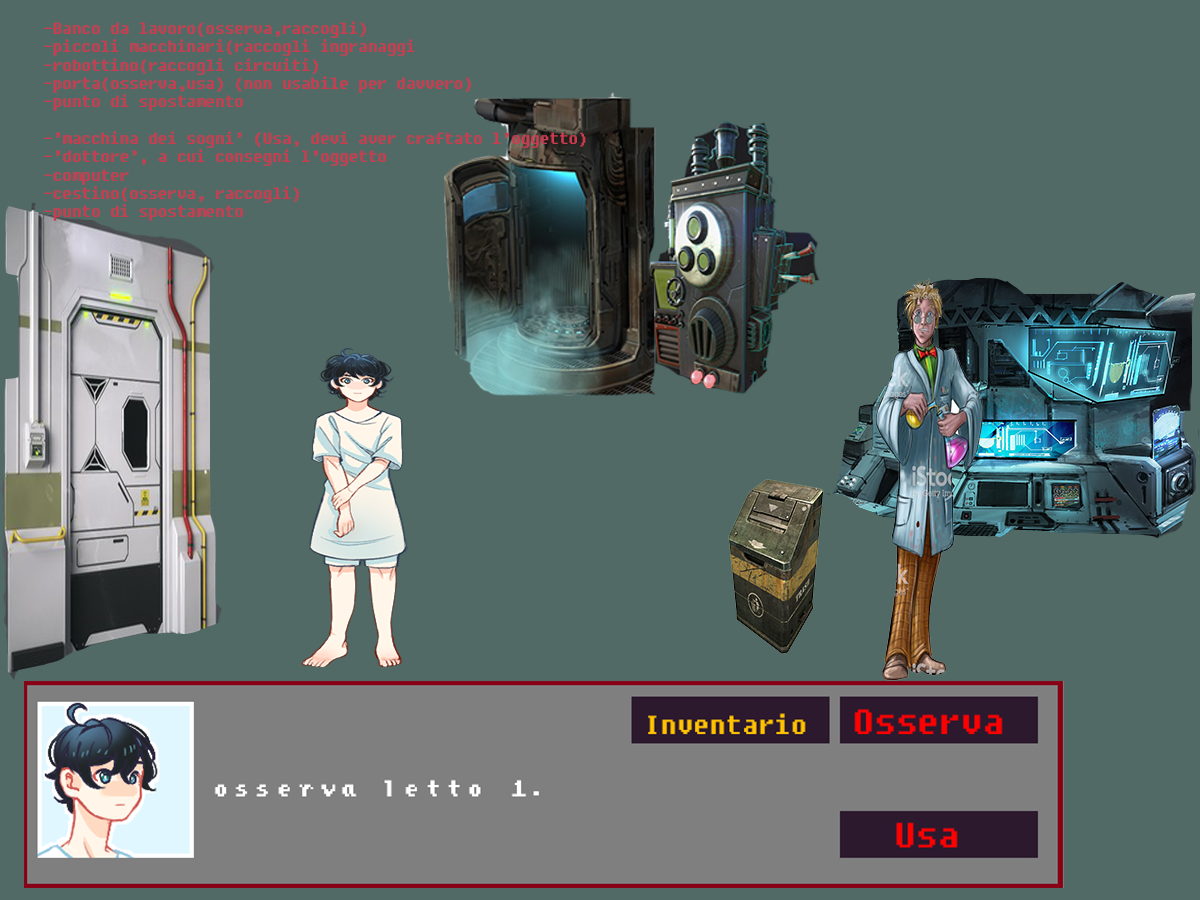
<style>
.page{position:relative;width:1200px;height:900px;background:#516a66}
.page>*{position:absolute;margin:0}
.t1{font:15.3px "Fixedsys";color:#cb3b4f}
</style>
<div class="page">
<p class="t1" style="left:44px;top:21px;width:542px;height:200px">-Banco da lavoro(osserva,raccogli)<br>-piccoli macchinari(raccogli ingranaggi<br>-robottino(raccogli circuiti)<br>-porta(osserva,usa) (non usabile per davvero)<br>-punto di spostamento<br><br>-’macchina dei sogni’ (Usa, devi aver craftato l’oggetto)<br>-’dottore’, a cui consegni l’oggetto<br>-computer<br>-cestino(osserva, raccogli)<br>-punto di spostamento</p>
</div>
